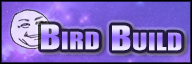
<style>
.page{position:relative;width:192px;height:64px}
.page>*{position:absolute;margin:0}
.t1{font:34.2px "Genuine";letter-spacing:0.04em;font-variant:small-caps;scale:1.26 1}
</style>
<div class="page">
<p class="t1" style="left:41px;top:24px;width:58px;height:26px">Bird</p>
<p class="t1" style="left:112px;top:25px;width:70px;height:26px">Build</p>
</div>
